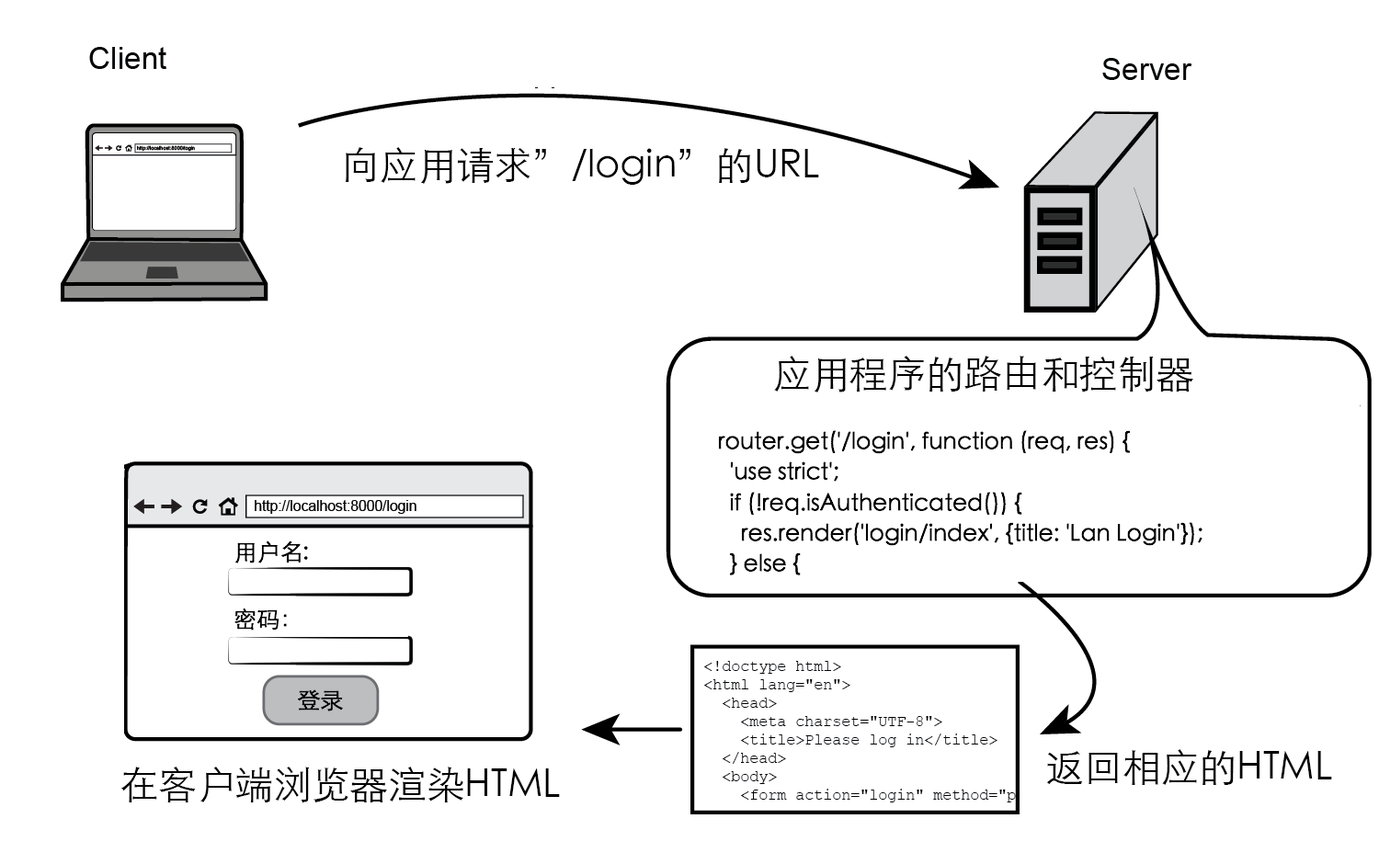
<style>
.page{position:relative;width:1379px;height:864px;background:#ffffff}
.page>*{position:absolute;margin:0}
.t1{font:38.3px "STHeitiSC-Light";color:#000001}
.t2{font:38.3px "STHeitiSC-Light";color:#000000}
.t3{font:23px/30.7px "STHeitiSC-Light";color:#000000}
.t4{font:23px "STHeitiSC-Light";color:#000000}
</style>
<div class="page">
<p class="t1" style="left:346px;top:147px;width:473px;height:38px">向应用请求”/login”的URL</p>
<p class="t2" style="left:774px;top:356px;width:420px;height:37px">应用程序的路由和控制器</p>
<p class="t3" style="left:718px;top:430px;width:485px;height:146px">router.get('/login', function (req, res) {<br>  'use strict';<br>  if (!req.isAuthenticated()) {<br>    res.render('login/index', {title: 'Lan Login'});<br>  } else {</p>
<p class="t4" style="left:235px;top:541px;width:73px;height:23px">用户名:</p>
<p class="t4" style="left:235px;top:609px;width:52px;height:22px">密码：</p>
<p class="t4" style="left:297px;top:690px;width:46px;height:22px">登录</p>
<p class="t2" style="left:1047px;top:749px;width:286px;height:36px">返回相应的HTML</p>
<p class="t2" style="left:120px;top:767px;width:440px;height:36px">在客户端浏览器渲染HTML</p>
</div>
